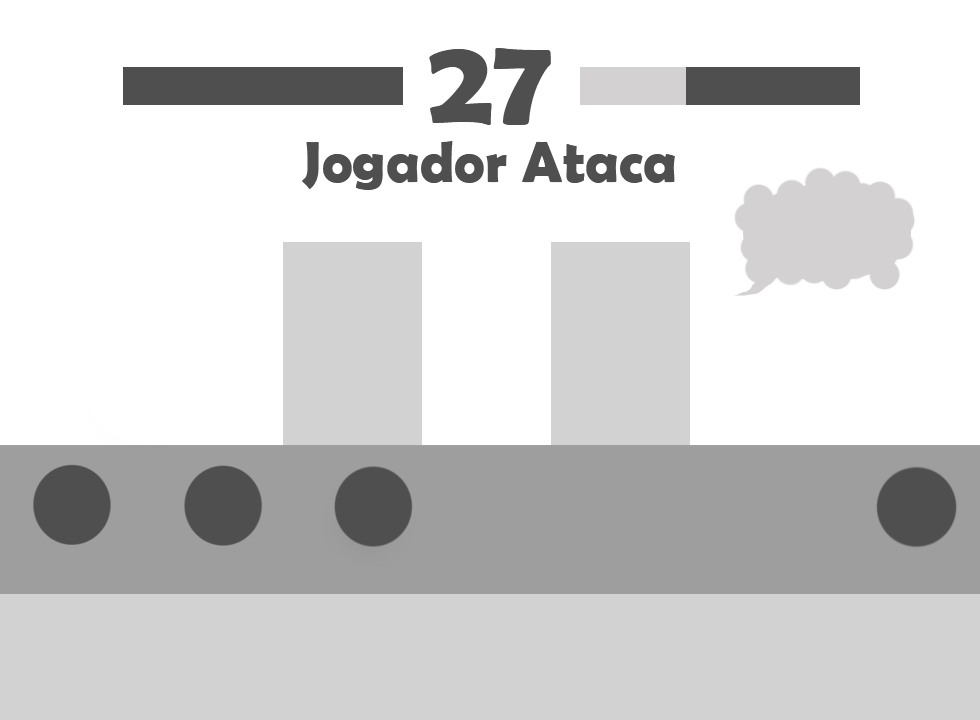
<style>
.page{position:relative;width:980px;height:720px;background:#ffffff}
.page>*{position:absolute;margin:0}
.t1{font:125px "BerlinSansFBDemi-Bold";color:#4f4f4f}
.t2{font:58.3px "BerlinSansFBDemi-Bold";color:#4f4f4f}
</style>
<div class="page">
<p class="t1" style="left:429px;top:48px;width:122px;height:77px">27</p>
<p class="t2" style="left:302px;top:141px;width:373px;height:49px">Jogador Ataca</p>
</div>
